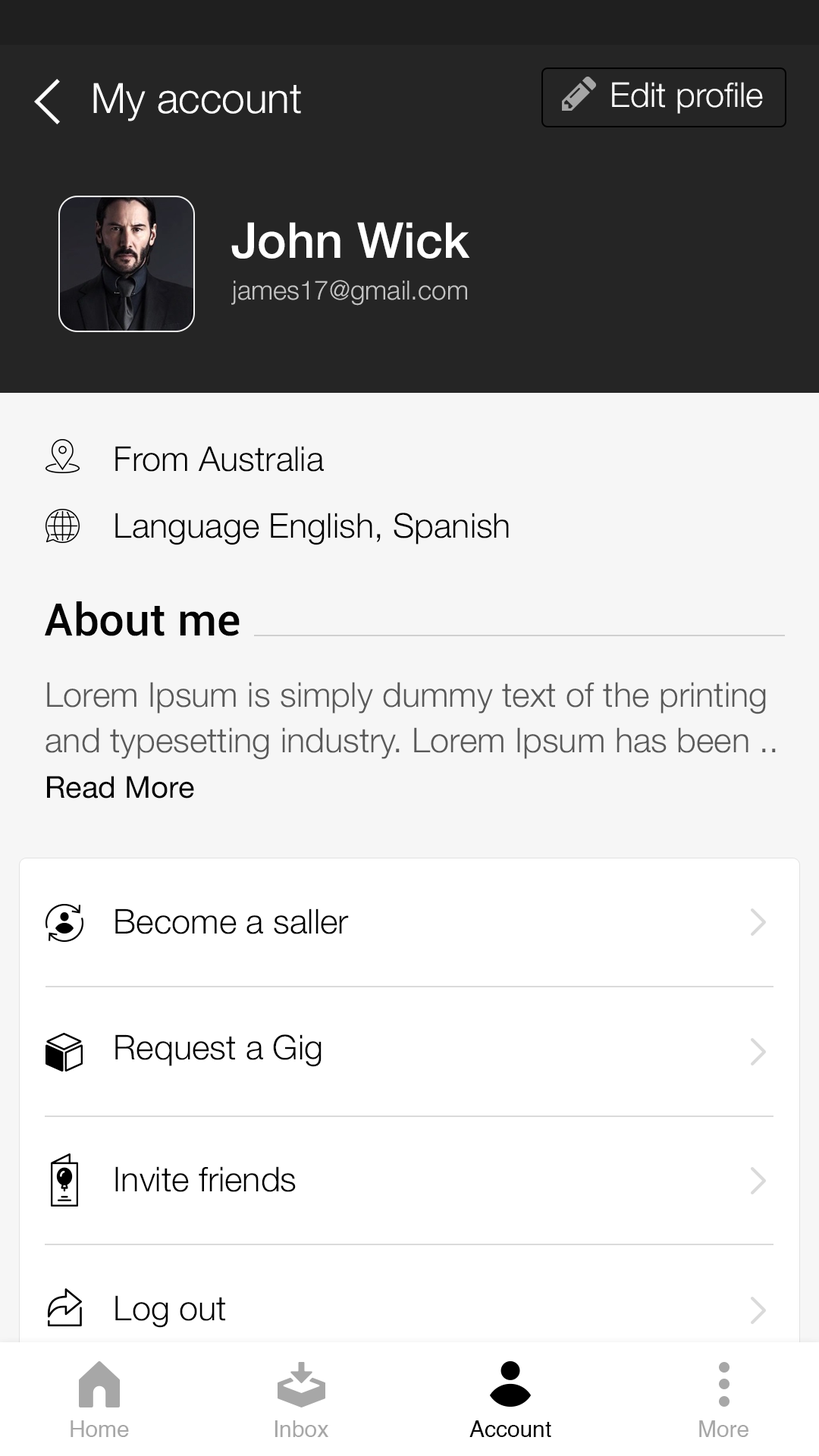
<style>
.page{position:relative;width:819px;height:1456px;background:#ffffff}
.page>*{position:absolute;margin:0}
.t1{font:41.7px "HelveticaNeue-Light";color:#ffffff}
.t2{font:34.1px "HelveticaNeue-Light";color:#ffffff}
.t3{font:49.3px "HelveticaNeue-Medium";color:#ffffff}
.t4{font:26.5px "HelveticaNeue-Light";color:#c5c5c5}
.t5{font:34.1px "HelveticaNeue-Light";color:#000000}
.t6{font:45.5px "Roboto-Medium";color:#030303}
.t7{font:34.1px/45.5px "HelveticaNeue-Light";color:#595959}
.t8{font:30.3px/45.5px "HelveticaNeue";color:#030303}
.t9{font:22.7px "Helvetica";color:#a7a7a7}
.t10{font:22.7px "Helvetica";color:#000000}
</style>
<div class="page">
<p class="t1" style="left:93px;top:83px;width:208px;height:38px">My account</p>
<p class="t2" style="left:612px;top:82px;width:151px;height:32px">Edit profile</p>
<p class="t3" style="left:231px;top:222px;width:239px;height:37px">John Wick</p>
<p class="t4" style="left:231px;top:280px;width:236px;height:26px">james17@gmail.com</p>
<p class="t5" style="left:115px;top:446px;width:209px;height:26px">From Australia</p>
<p class="t5" style="left:115px;top:513px;width:394px;height:32px">Language English, Spanish</p>
<p class="t6" style="left:45px;top:601px;width:195px;height:35px">About me</p>
<p class="t7" style="left:45px;top:682px;width:731px;height:117px">Lorem Ipsum is simply dummy text of the printing and typesetting industry. Lorem Ipsum has been .. <br><span class="t8">Read More</span></p>
<p class="t5" style="left:115px;top:908px;width:234px;height:26px">Become a saller</p>
<p class="t5" style="left:115px;top:1034px;width:207px;height:33px">Request a Gig</p>
<p class="t5" style="left:115px;top:1166px;width:181px;height:26px">Invite friends</p>
<p class="t5" style="left:115px;top:1295px;width:110px;height:33px">Log out</p>
<p class="t9" style="left:71px;top:1420px;width:58px;height:17px">Home</p>
<p class="t9" style="left:275px;top:1420px;width:53px;height:17px">Inbox</p>
<p class="t10" style="left:469px;top:1420px;width:82px;height:17px">Account</p>
<p class="t9" style="left:699px;top:1420px;width:49px;height:17px">More</p>
</div>
